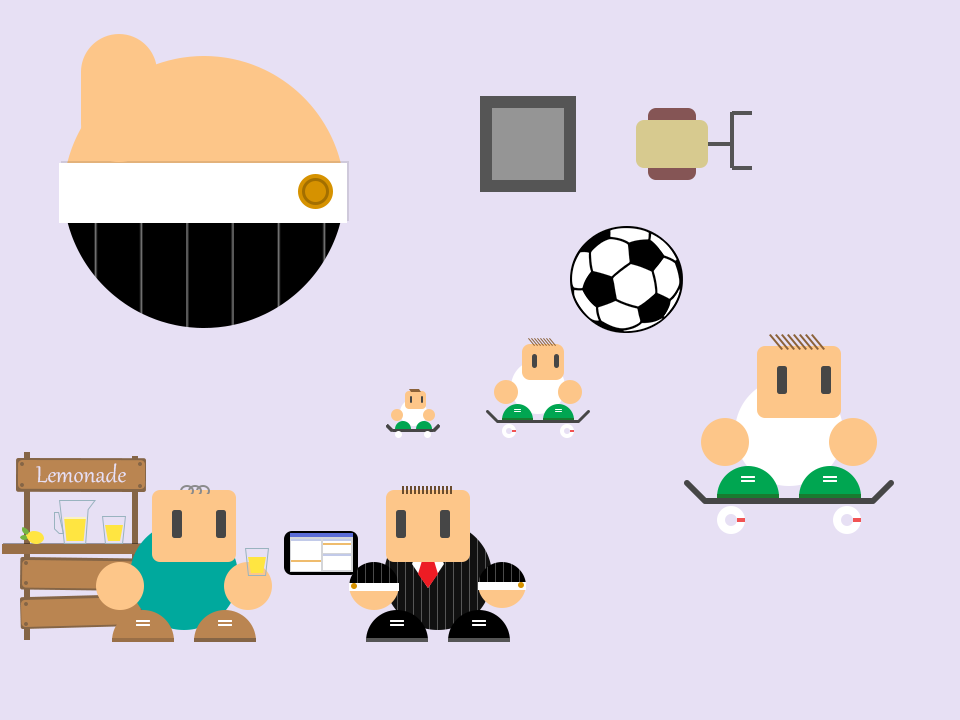
<style>
.page{position:relative;width:960px;height:720px;background:#e7e0f4}
.page>*{position:absolute;margin:0}
.t1{font:28px "Gabriola";color:#e7e0f4}
</style>
<div class="page">
<p class="t1" style="left:36px;top:463px;width:90px;height:20px">Lemonade</p>
</div>
